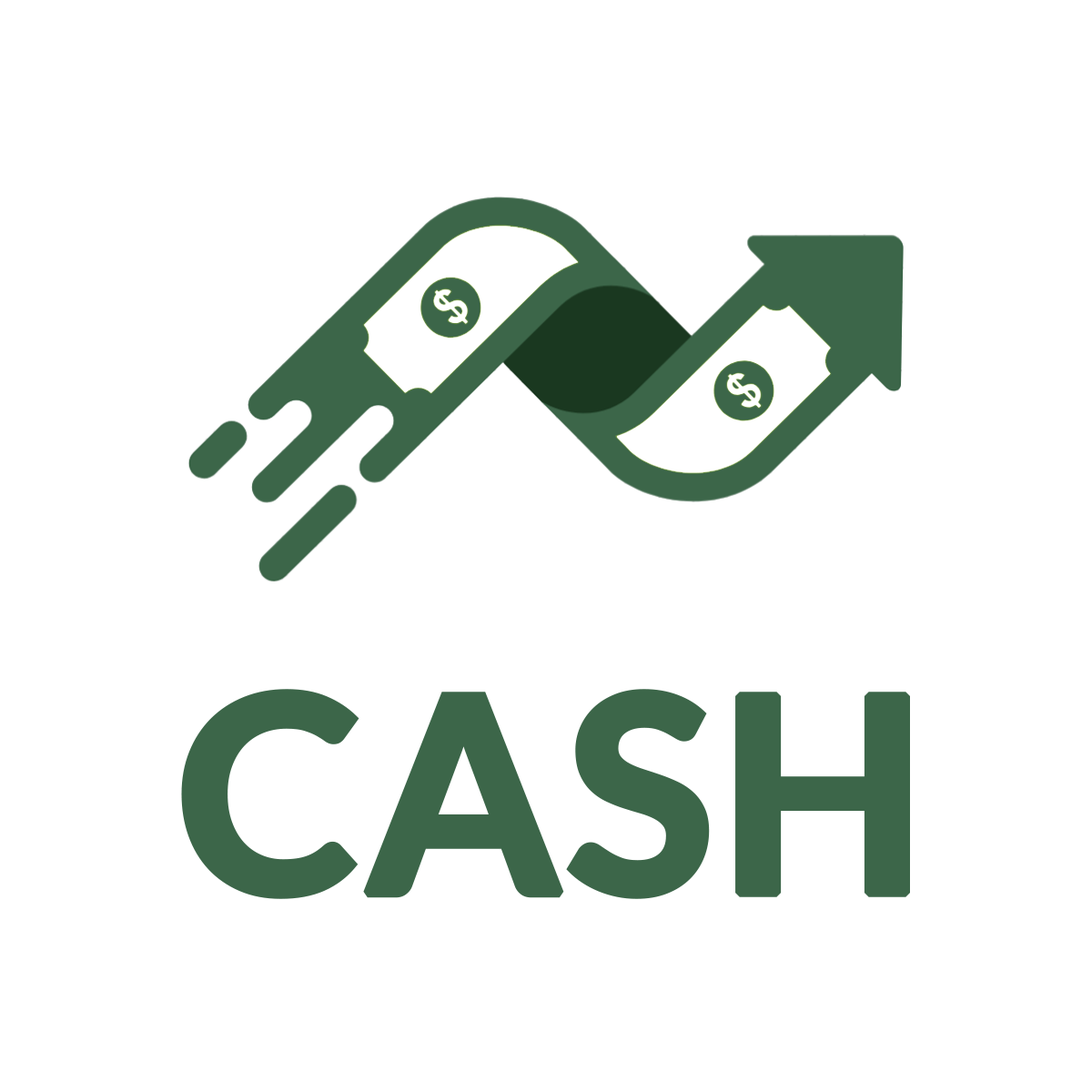
<style>
.page{position:relative;width:1092px;height:1092px;background:#ffffff}
.page>*{position:absolute;margin:0}
.t1{font:271.8px "Lato-Bold";color:#3c6649;text-transform:uppercase;font-weight:bold}
</style>
<div class="page">
<p class="t1" style="left:181px;top:689px;width:729px;height:210px">CASH</p>
</div>
